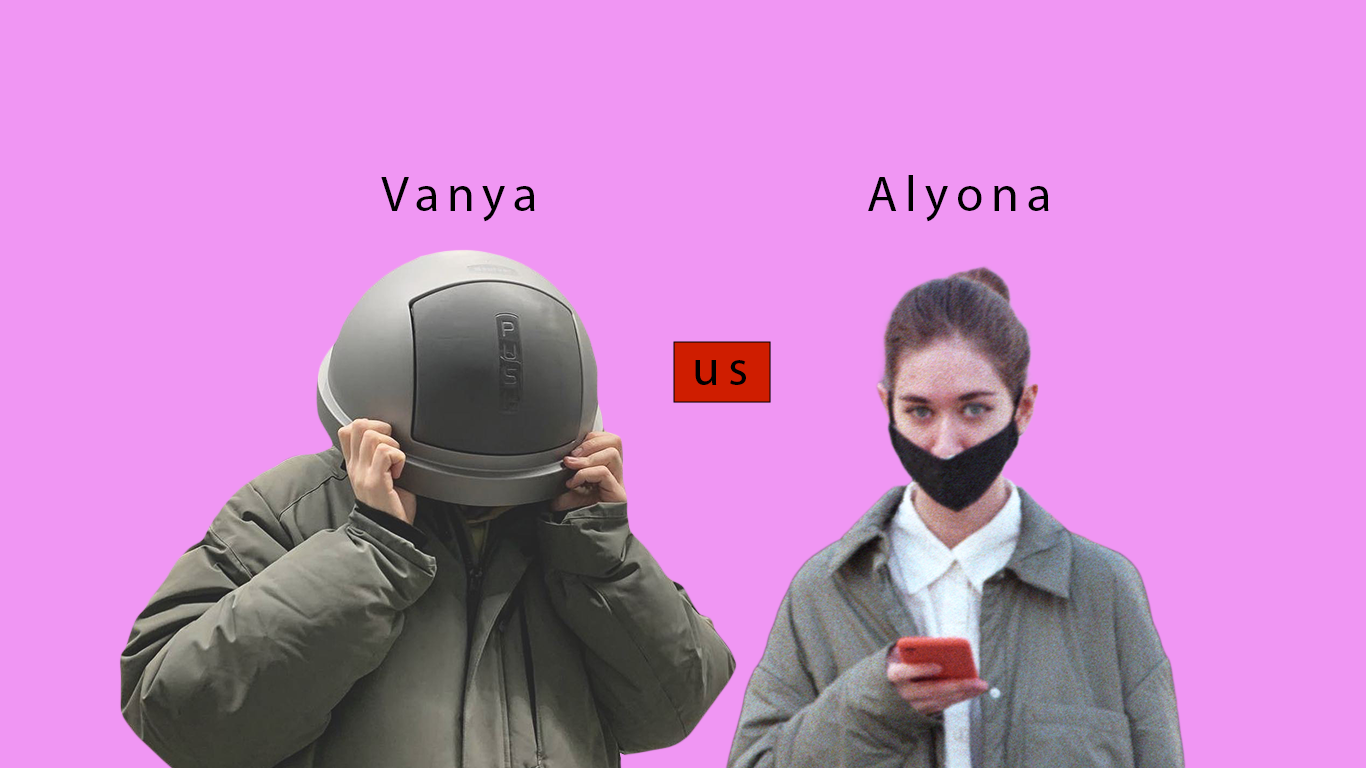
<style>
.page{position:relative;width:1366px;height:768px;background:#f096f3}
.page>*{position:absolute;margin:0}
.t1{font:50px "MyriadPro-Regular";letter-spacing:0.16em;color:#000000}
</style>
<div class="page">
<p class="t1" style="left:381px;top:177px;width:154px;height:45px">Vanya</p>
<p class="t1" style="left:868px;top:175px;width:181px;height:47px">Alyona</p>
<p class="t1" style="left:695px;top:360px;width:51px;height:25px">us</p>
</div>
